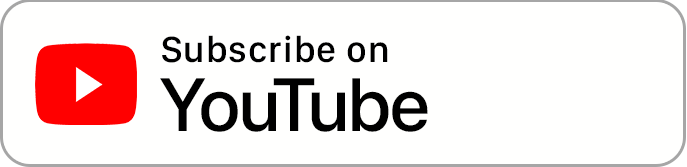
<style>
.page{position:relative;width:687px;height:167px;background:#fffffe}
.page>*{position:absolute;margin:0}
.t1{font:37.5px "SFCompactDisplay-Medium";letter-spacing:0.025em;color:#000000}
.t2{font:75px "SFProDisplay-Medium";letter-spacing:-0.01em;color:#000000}
</style>
<div class="page">
<p class="t1" style="left:162px;top:35px;width:226px;height:28px">Subscribe on</p>
<p class="t2" style="left:160px;top:78px;width:268px;height:54px">YouTube</p>
</div>
